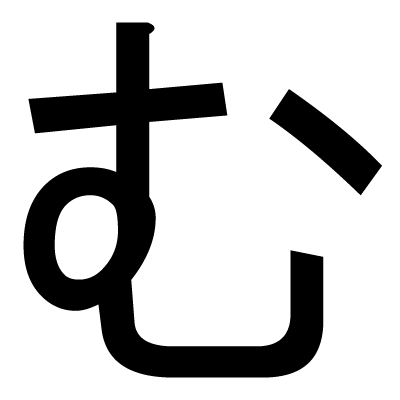
<style>
.page{position:relative;width:400px;height:400px;background:#ffffff}
.page>*{position:absolute;margin:0}
.t1{font:416.7px "MS-PGothic";color:#000000}
</style>
<div class="page">
<p class="t1" style="left:23px;top:22px;width:359px;height:356px">む</p>
</div>
